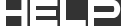
<style>
.page{position:relative;width:121px;height:26px;background:#ffffff}
.page>*{position:absolute;margin:0}
.t1{font:50px "Bitsumishi";color:#ffffff}
</style>
<div class="page">
<p class="t1" style="left:0px;top:0px;width:121px;height:26px">Help</p>
</div>
